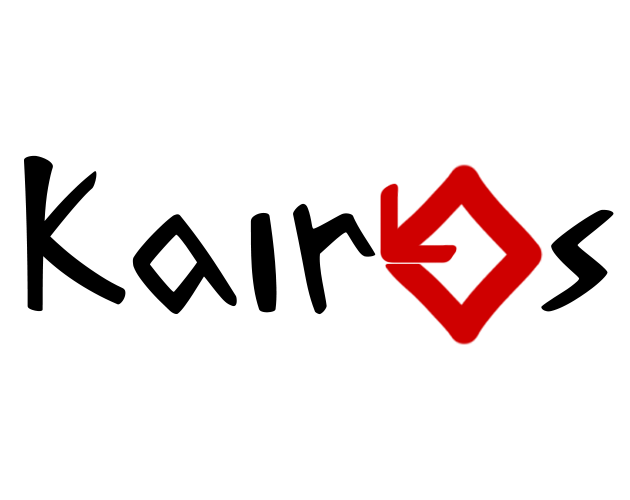
<style>
.page{position:relative;width:630px;height:500px;background:#ffffff}
.page>*{position:absolute;margin:0}
.t1{font:194px "AcadianRunes-Regular";color:#000000}
</style>
<div class="page">
<p class="t1" style="left:24px;top:155px;width:352px;height:160px">Kair</p>
<p class="t1" style="left:541px;top:209px;width:73px;height:103px">s</p>
</div>
